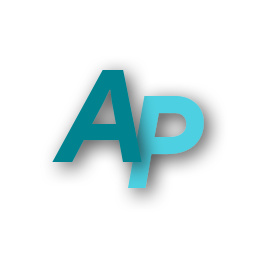
<style>
.page{position:relative;width:256px;height:256px;background:#ffffff}
.page>*{position:absolute;margin:0}
.t1{font:129px "ProductSans-BoldItalic";letter-spacing:-0.22em;color:#00838f}
.t2{font:129px "ProductSans-BoldItalic";letter-spacing:-0.22em;color:#4dd0e1}
</style>
<div class="page">
<p class="t1" style="left:52px;top:70px;width:90px;height:92px">A</p>
<p class="t2" style="left:128px;top:96px;width:76px;height:92px">P</p>
</div>
